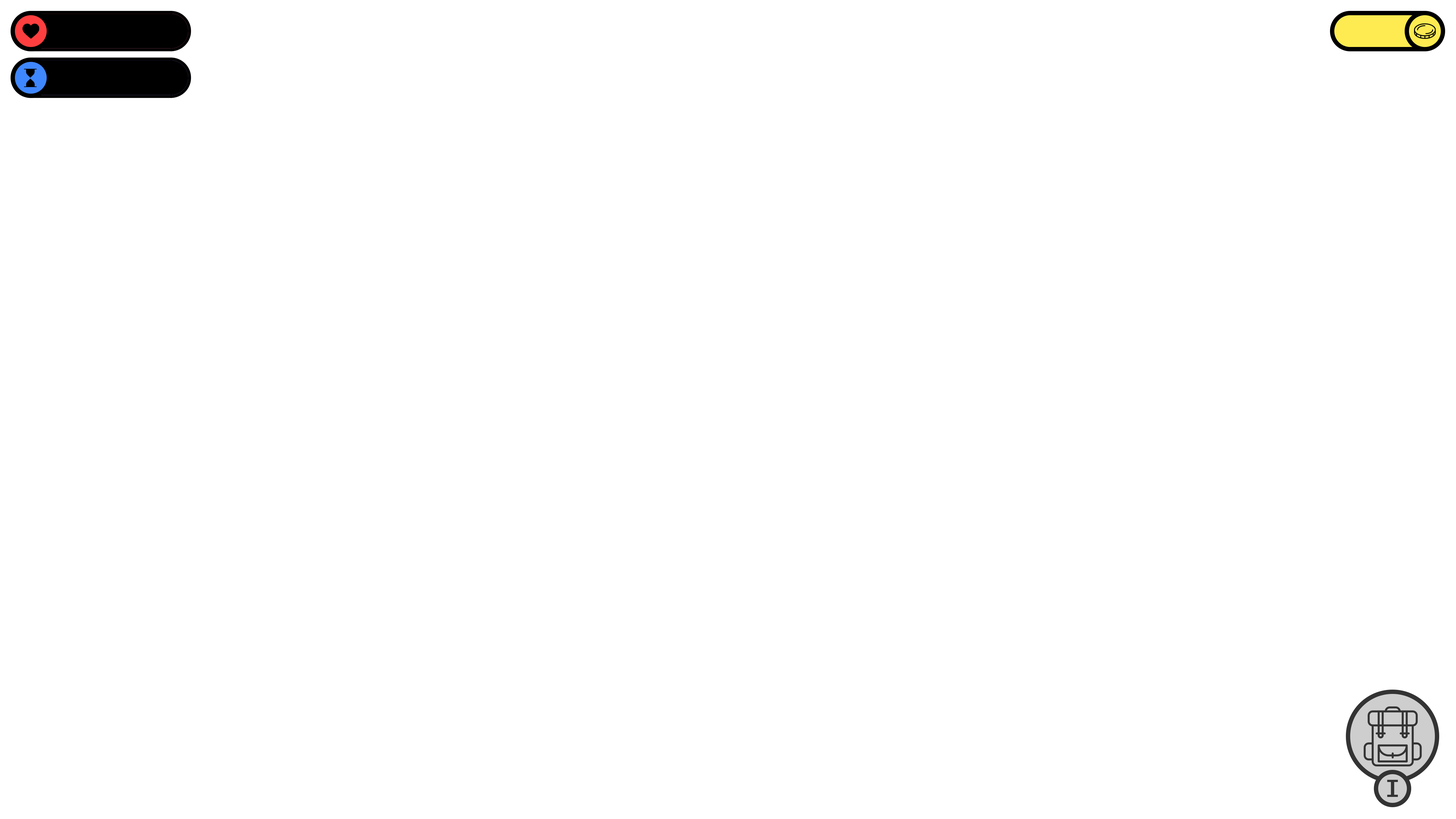
<style>
.page{position:relative;width:1456px;height:819px;background:#ffffff}
.page>*{position:absolute;margin:0}
.t1{font:21.6px "Unispace-Bold";color:#333333}
</style>
<div class="page">
<p class="t1" style="left:1387px;top:780px;width:11px;height:17px">I</p>
</div>
